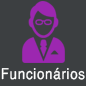
<style>
.page{position:relative;width:86px;height:86px;background:#3c3f41}
.page>*{position:absolute;margin:0}
.t1{font:14.6px "Helvetica-Normal";letter-spacing:0.06em;color:#ffffff;scale:0.9 1}
</style>
<div class="page">
<p class="t1" style="left:1px;top:67px;width:84px;height:13px">Funcionários</p>
</div>
